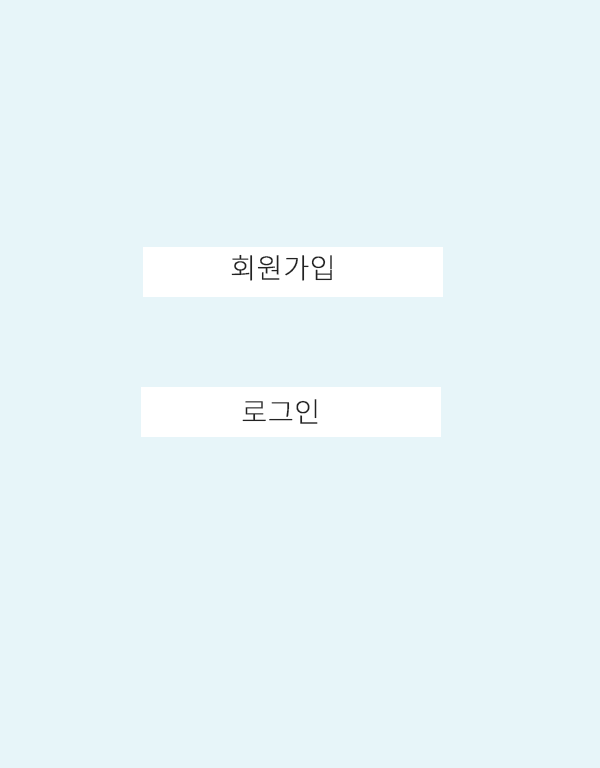
<style>
.page{position:relative;width:600px;height:768px;background:#e7f5f9}
.page>*{position:absolute;margin:0}
.t1{font:28px "NotoSansKR-Thin";color:#222222;font-weight:bold}
</style>
<div class="page">
<p class="t1" style="left:231px;top:254px;width:101px;height:27px">회원가입</p>
<p class="t1" style="left:242px;top:399px;width:76px;height:25px">로그인</p>
</div>
